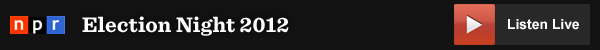
<style>
.page{position:relative;width:600px;height:50px;background:#121212}
.page>*{position:absolute;margin:0}
.t1{font:22px "Sentinel-Bold";letter-spacing:0.01em;color:#ffffff}
.t2{font:14px "Arial-BoldMT";color:#ffffff}
</style>
<div class="page">
<p class="t1" style="left:82px;top:16px;width:207px;height:20px">Election Night 2012</p>
<p class="t2" style="left:508px;top:19px;width:71px;height:11px">Listen Live</p>
</div>
